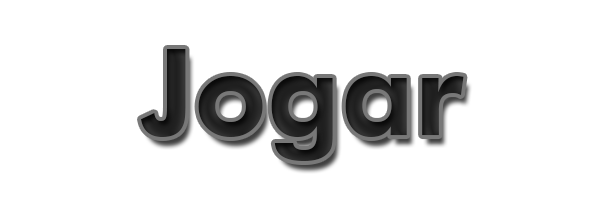
<style>
.page{position:relative;width:600px;height:200px;background:#ffffff}
.page>*{position:absolute;margin:0}
.t1{font:120px "FuturaBT-Heavy";color:#212121}
</style>
<div class="page">
<p class="t1" style="left:141px;top:49px;width:323px;height:112px">Jogar</p>
</div>
